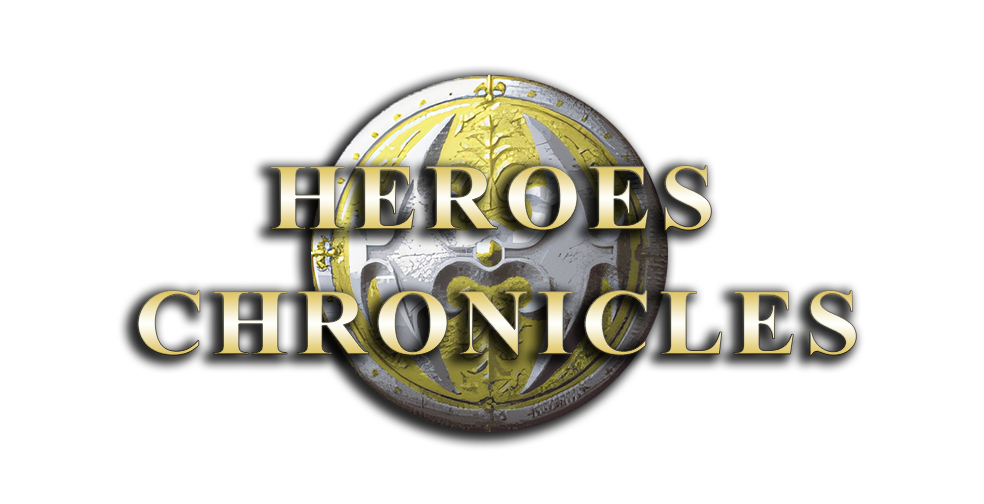
<style>
.page{position:relative;width:984px;height:504px;background:#ffffff}
.page>*{position:absolute;margin:0}
.t1{font:94px "TimesNewRomanPS-BoldMT";letter-spacing:0.07em;scale:1.05 1}
</style>
<div class="page">
<p class="t1" style="left:270px;top:165px;width:442px;height:66px">HEROES</p>
<p class="t1" style="left:137px;top:290px;width:720px;height:66px">CHRONICLES</p>
</div>
